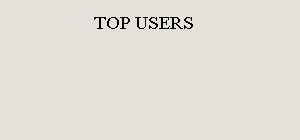
<style>
.page{position:relative;width:300px;height:140px;background:#e4e0da}
.page>*{position:absolute;margin:0}
.t1{font:18px "TimesNewRomanPSMT";color:#050504}
</style>
<div class="page">
<p class="t1" style="left:94px;top:17px;width:99px;height:12px">TOP USERS</p>
</div>
